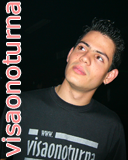
<style>
.page{position:relative;width:128px;height:160px}
.page>*{position:absolute;margin:0}
.t1{font:24px "Verdana";color:#fd8a8a}
</style>
<div class="page">
<p class="t1" style="left:2px;top:2px;width:19px;height:155px;rotate:-90deg">visaonoturna</p>
</div>
